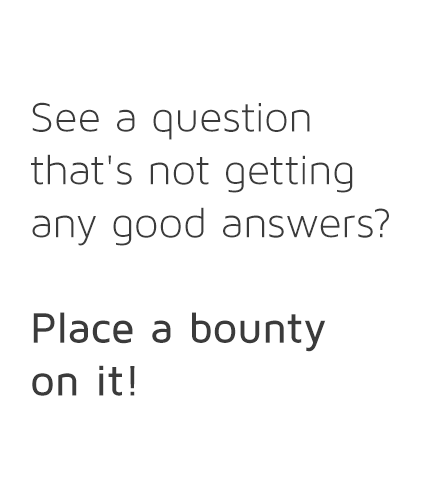
<style>
.page{position:relative;width:440px;height:500px;background:#ffffff}
.page>*{position:absolute;margin:0}
.t1{font:44px "MavenProLight300-Regular";color:#3b3b3b}
.t2{font:44px "MavenProMedium";color:#3b3b3b}
</style>
<div class="page">
<p class="t1" style="left:31px;top:102px;width:358px;height:294px">See a question that's not getting any good answers? <br><br><span class="t2">Place a bounty<br>on it!</span></p>
</div>
